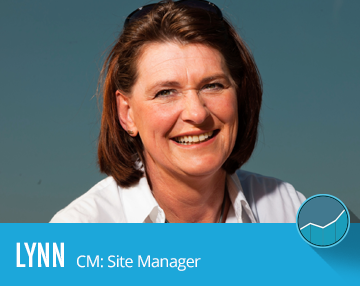
<style>
.page{position:relative;width:360px;height:286px}
.page>*{position:absolute;margin:0}
.t1{font:32px "Futura-CondensedMedium";letter-spacing:-0.01em;color:#ffffff}
.t2{font:16px "OpenSans";letter-spacing:-0.025em;color:#ffffff}
</style>
<div class="page">
<p class="t1" style="left:16px;top:242px;width:48px;height:25px">LYNN</p>
<p class="t2" style="left:77px;top:255px;width:124px;height:16px">CM: Site Manager</p>
</div>
